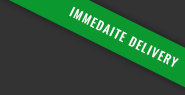
<style>
.page{position:relative;width:185px;height:95px;background:#333333}
.page>*{position:absolute;margin:0}
.t1{font:12px "Oswald-Medium";letter-spacing:0.1em;color:#ffffff}
</style>
<div class="page">
<p class="t1" style="left:69px;top:6px;width:110px;height:61px;rotate:26deg">IMMEDAITE DELIVERY</p>
</div>
